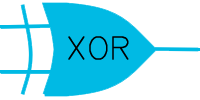
<style>
.page{position:relative;width:200px;height:100px;background:#ffffff}
.page>*{position:absolute;margin:0}
.t1{font:30px "SWSimp";color:#000000}
</style>
<div class="page">
<p class="t1" style="left:68px;top:36px;width:61px;height:24px">XOR</p>
</div>
